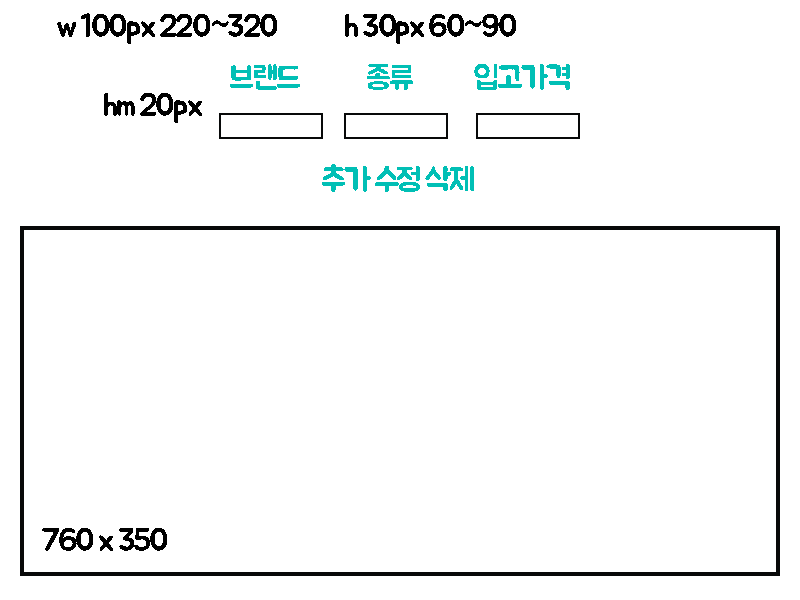
<style>
.page{position:relative;width:800px;height:600px;background:#ffffff}
.page>*{position:absolute;margin:0}
.t1{font:32px "BMJUA";letter-spacing:-0.075em;color:#000000}
.t2{font:32px "BMJUA";letter-spacing:-0.075em;color:#01bfb5}
</style>
<div class="page">
<p class="t1" style="left:57px;top:13px;width:220px;height:31px">w 100px 220~320</p>
<p class="t1" style="left:345px;top:14px;width:171px;height:30px">h 30px 60~90</p>
<p class="t2" style="left:230px;top:64px;width:340px;height:26px">브랜드            종류           입고가격</p>
<p class="t1" style="left:104px;top:93px;width:98px;height:30px">hm 20px</p>
<p class="t2" style="left:322px;top:164px;width:152px;height:28px">추가 수정 삭제</p>
<p class="t1" style="left:42px;top:528px;width:125px;height:23px">760 x 350</p>
</div>
